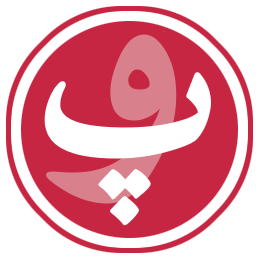
<style>
.page{position:relative;width:256px;height:256px;background:#ffffff}
.page>*{position:absolute;margin:0}
.t1{font:260px "BYasBold";letter-spacing:-0.05em;color:#ffffff}
</style>
<div class="page">
<p class="t1" style="left:46px;top:73px;width:164px;height:151px">پ</p>
</div>
